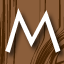
<style>
.page{position:relative;width:64px;height:64px;background:#8b5e3b}
.page>*{position:absolute;margin:0}
.t1{font:60.2px "LithosPro-Regular";color:#ffffff;scale:0.91 1}
</style>
<div class="page">
<p class="t1" style="left:5px;top:8px;width:56px;height:45px">M</p>
</div>
